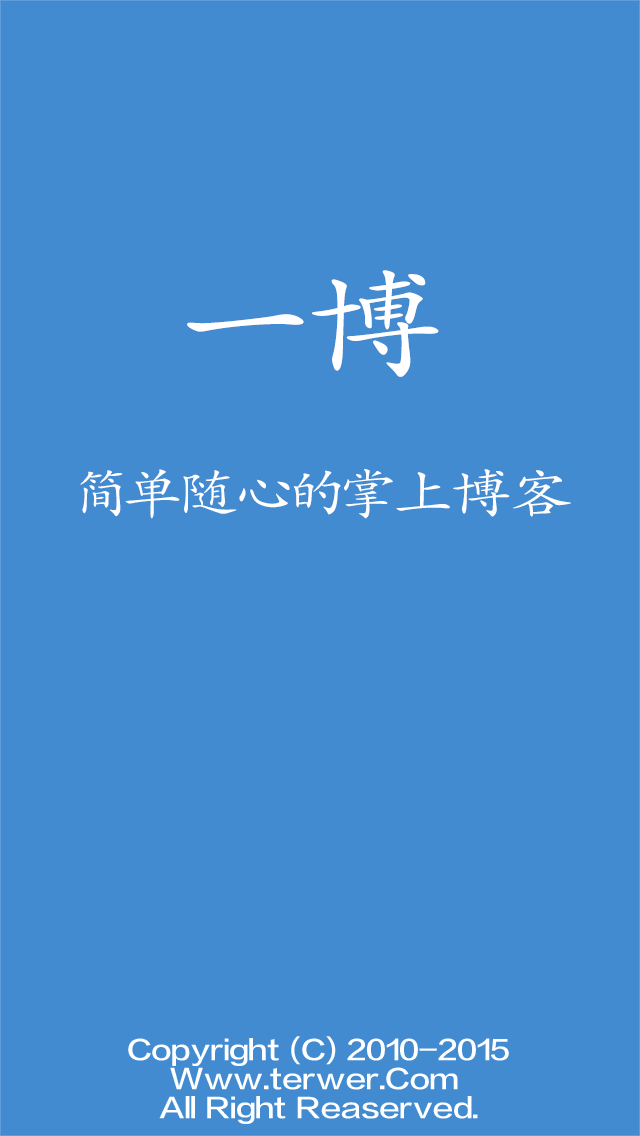
<style>
.page{position:relative;width:640px;height:1136px;background:#428bd1}
.page>*{position:absolute;margin:0}
.t1{font:119.9px "STKaiti";letter-spacing:0.06em;color:#ffffff;scale:1.17 1}
.t2{font:53.3px "STKaiti";letter-spacing:0.06em;color:#ffffff;scale:1.17 1}
.t3{font:26.6px "FZLTZHK--GBK1-0";letter-spacing:0.06em;color:#ffffff;scale:1.17 1}
</style>
<div class="page">
<p class="t1" style="left:187px;top:270px;width:252px;height:107px">一博</p>
<p class="t2" style="left:80px;top:469px;width:491px;height:50px">简单随心的掌上博客</p>
<p class="t3" style="left:128px;top:1036px;width:381px;height:88px">Copyright (C) 2010-2015<br>    Www.terwer.Com <br>   All Right Reaserved.</p>
</div>
